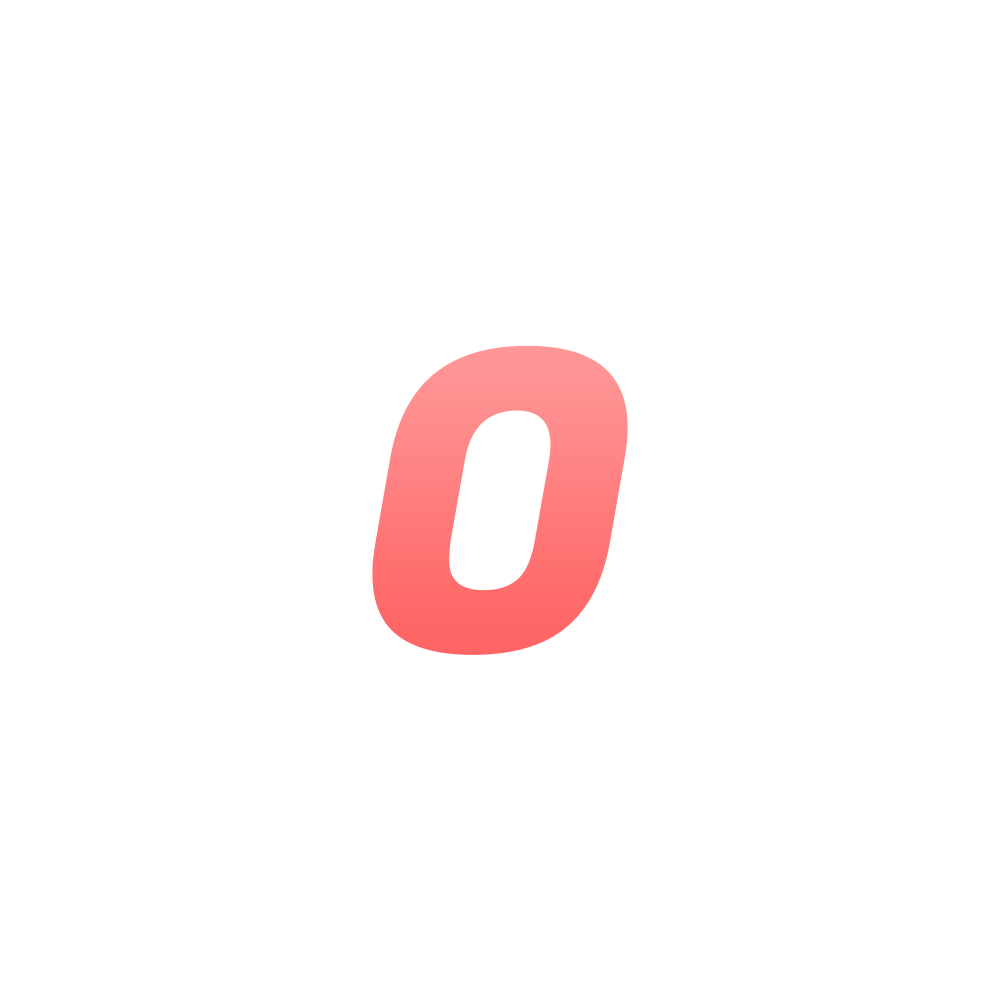
<style>
.page{position:relative;width:1000px;height:1000px;background:#ffffff}
.page>*{position:absolute;margin:0}
.t1{font:416.7px "FugazOne-Regular";color:#ff7d7d}
</style>
<div class="page">
<p class="t1" style="left:372px;top:345px;width:256px;height:310px">O</p>
</div>
